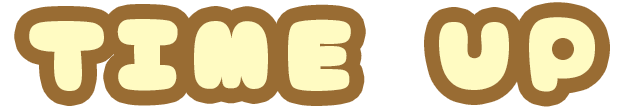
<style>
.page{position:relative;width:624px;height:112px;background:#996c33}
.page>*{position:absolute;margin:0}
.t1{font:100px "AmeChanPopMaruLight-Regular";letter-spacing:0.08em;color:#fffbc2}
</style>
<div class="page">
<p class="t1" style="left:29px;top:17px;width:566px;height:75px">TIME UP</p>
</div>
